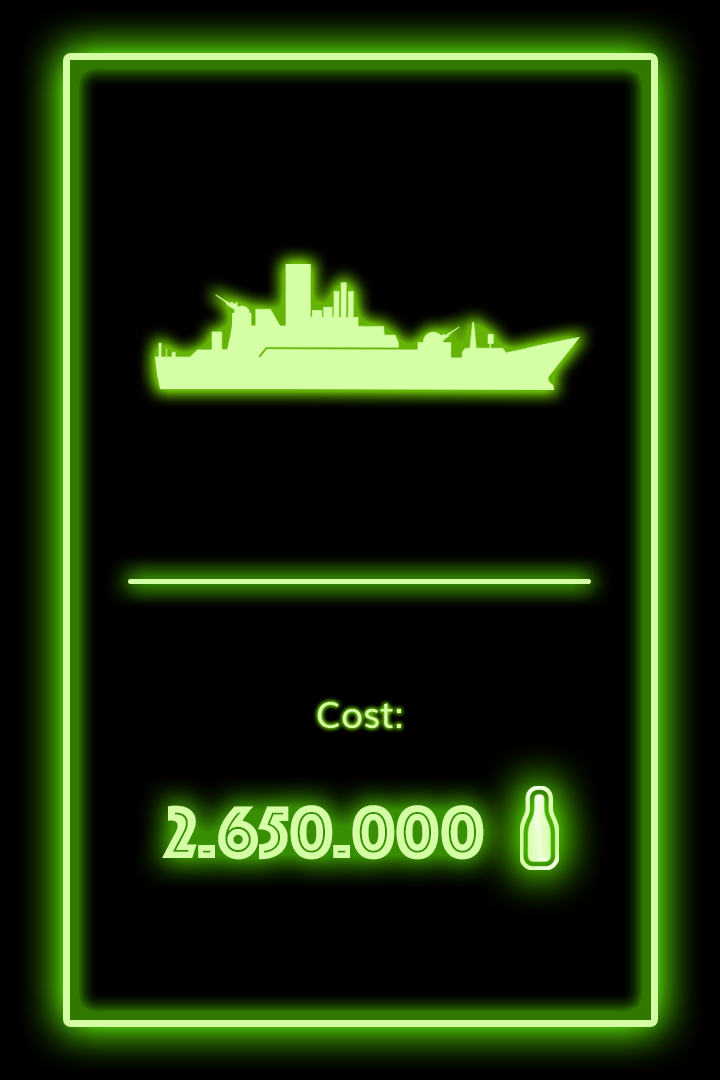
<style>
.page{position:relative;width:720px;height:1080px;background:#000000}
.page>*{position:absolute;margin:0}
.t1{font:36px "Muli";color:#d5ffa4}
.t2{font:77.4px "Phosphate-Inline";color:#d5ffa4}
</style>
<div class="page">
<p class="t1" style="left:317px;top:702px;width:84px;height:26px">Cost:</p>
<p class="t2" style="left:162px;top:805px;width:322px;height:55px">2.650.000</p>
</div>
